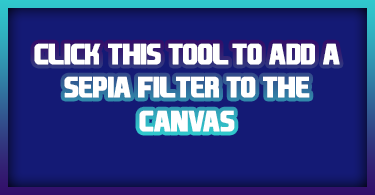
<style>
.page{position:relative;width:375px;height:195px;background:#141a75}
.page>*{position:absolute;margin:0}
.t1{font:27.8px "EASPORTS";letter-spacing:-0.05em;color:#ffffff;font-weight:bold}
</style>
<div class="page">
<p class="t1" style="left:34px;top:43px;width:306px;height:89px;text-align:center">Click  this  tool to  add  a  sepia  filter  to  the  canvas</p>
</div>
